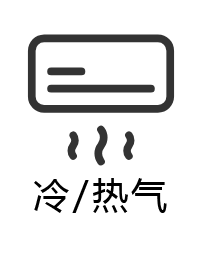
<style>
.page{position:relative;width:200px;height:255px;background:#ffffff}
.page>*{position:absolute;margin:0}
.t1{font:36px "MicrosoftYaHei";letter-spacing:0.1em;color:#000000}
</style>
<div class="page">
<p class="t1" style="left:34px;top:178px;width:133px;height:35px">冷/热气</p>
</div>
